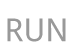
<style>
.page{position:relative;width:70px;height:55px;background:#ffffff}
.page>*{position:absolute;margin:0}
.t1{font:31.8px "DroidSans";color:#999999}
</style>
<div class="page">
<p class="t1" style="left:7px;top:18px;width:59px;height:24px">RUN</p>
</div>
